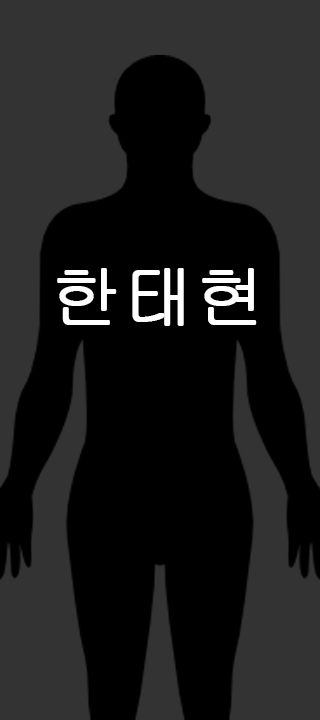
<style>
.page{position:relative;width:320px;height:720px;background:#000000}
.page>*{position:absolute;margin:0}
.t1{font:70px "Gulim";letter-spacing:0.005em;color:#ffffff;font-weight:bold}
</style>
<div class="page">
<p class="t1" style="left:57px;top:268px;width:200px;height:58px">한태현</p>
</div>
